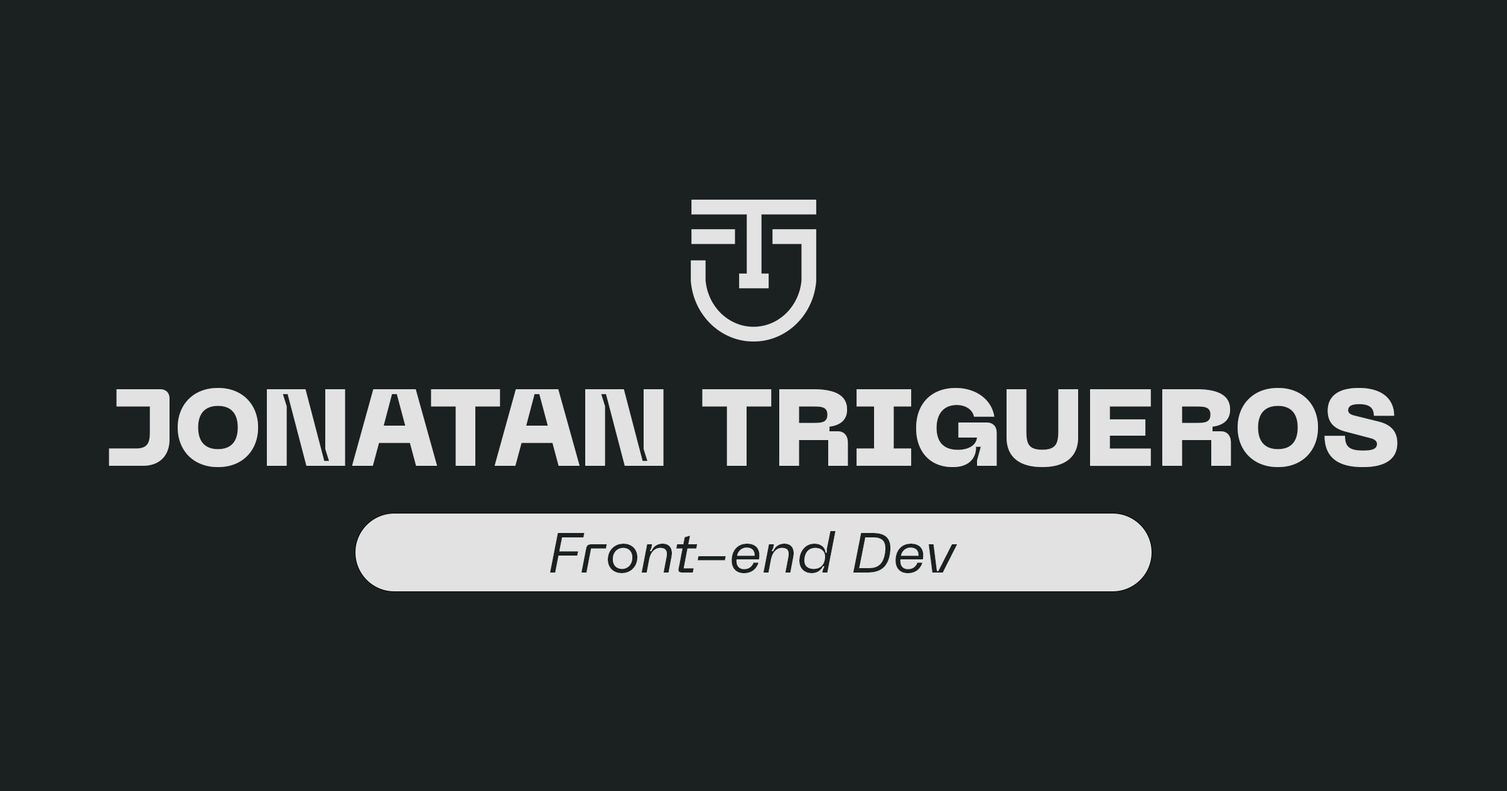
<style>
.page{position:relative;width:1507px;height:791px;background:#1b2021}
.page>*{position:absolute;margin:0}
.t1{font:108.3px "PPNeueMachina-InktrapUltrabold";color:#e2e2e2;text-transform:uppercase}
.t2{font:56.5px "PPNeueMachina-InktrapRegularItalic";color:#1b2021}
</style>
<div class="page">
<p class="t1" style="left:109px;top:388px;width:1289px;height:80px">Jonatan Trigueros</p>
<p class="t2" style="left:550px;top:531px;width:408px;height:42px">Front-end Dev</p>
</div>
